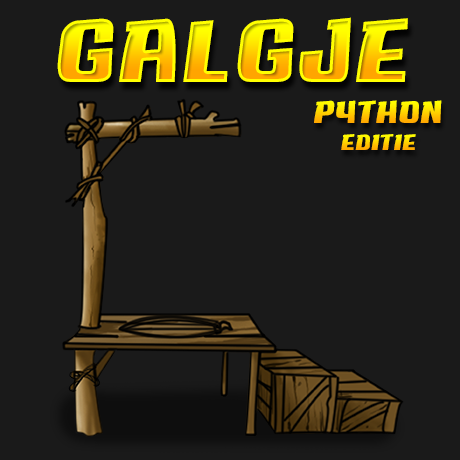
<style>
.page{position:relative;width:460px;height:460px;background:#1a1a1a}
.page>*{position:absolute;margin:0}
.t1{font:80px "Big-Sale-v1.0";letter-spacing:0.05em}
.t2{font:28px "Big-Sale-v1.0";letter-spacing:0.05em}
.t3{font:20px "Big-Sale-v1.0";letter-spacing:0.05em}
</style>
<div class="page">
<p class="t1" style="left:57px;top:17px;width:351px;height:65px">GALGJE</p>
<p class="t2" style="left:314px;top:100px;width:128px;height:23px">Python</p>
<p class="t3" style="left:341px;top:134px;width:75px;height:16px">Editie</p>
</div>
